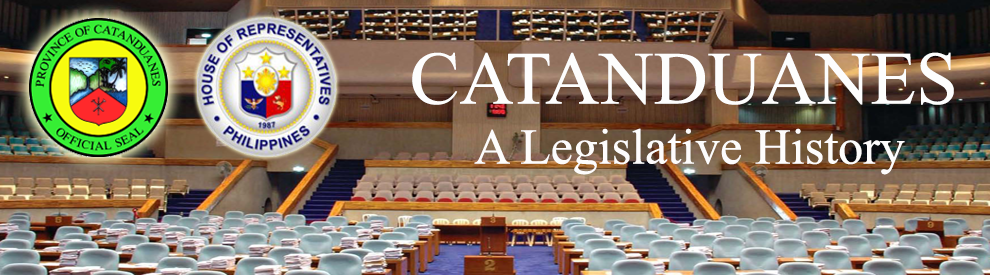
<style>
.page{position:relative;width:990px;height:275px}
.page>*{position:absolute;margin:0}
.t1{font:50px "TimesNewRomanPSMT";color:#fdfcfc}
.t2{font:75px "TimesNewRomanPSMT";color:#fdfdfd}
</style>
<div class="page">
<p class="t1" style="left:412px;top:52px;width:542px;height:123px;text-align:center"><span class="t2">CATANDUANES<br></span>A Legislative History</p>
</div>
